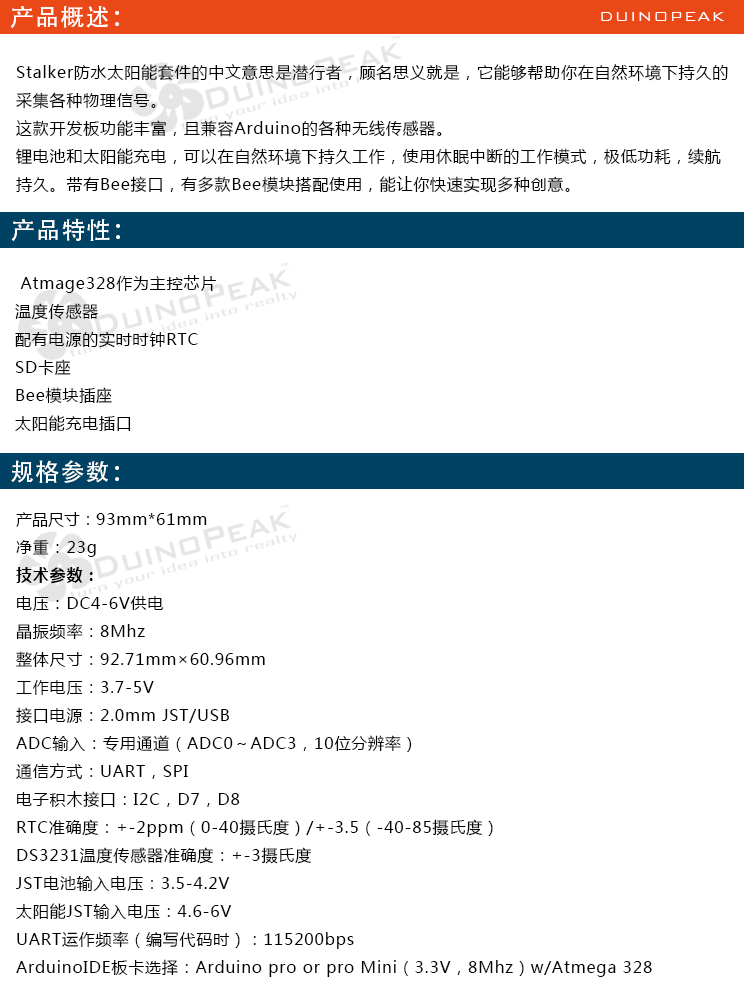
<style>
.page{position:relative;width:744px;height:992px;background:#ffffff}
.page>*{position:absolute;margin:0}
.t1{font:24px "AdobeHeitiStd-Regular";letter-spacing:0.05em;color:#ffffff}
.t2{font:18px "BankGothicBT-Light";letter-spacing:0.05em;color:#ffffff}
.t3{font:16px "MicrosoftYaHei";letter-spacing:0.05em;color:#000000}
.t4{font:16px "MicrosoftYaHei";color:#000000}
.t5{font:16px "MicrosoftYaHei-Bold";letter-spacing:0.05em;color:#000000}
</style>
<div class="page">
<p class="t1" style="left:10px;top:6px;width:109px;height:23px">产品概述：</p>
<p class="t2" style="left:601px;top:12px;width:124px;height:9px">DUINOPEAK</p>
<p class="t3" style="left:16px;top:64px;width:712px;height:129px">Stalker防水太阳能套件的中文意思是潜行者，顾名思义就是，它能够帮助你在自然环境下持久的<br>采集各种物理信号。<br>这款开发板功能丰富，且兼容Arduino的各种无线传感器。<br>锂电池和太阳能充电，可以在自然环境下持久工作，使用休眠中断的工作模式，极低功耗，续航<br>持久。带有Bee接口，有多款Bee模块搭配使用，能让你快速实现多种创意。</p>
<p class="t1" style="left:11px;top:218px;width:109px;height:24px">产品特性：</p>
<p class="t3" style="left:15px;top:275px;width:201px;height:157px">Atmage328作为主控芯片<br>温度传感器<br>配有电源的实时时钟RTC<br>SD卡座<br>Bee模块插座<br>太阳能充电插口</p>
<p class="t1" style="left:11px;top:460px;width:108px;height:23px">规格参数：</p>
<p class="t3" style="left:16px;top:512px;width:636px;height:465px"><span class="t4">产品尺寸：</span>93mm*61mm<br>净重：23g<br><span class="t5">技术参数：<br></span>电压：DC4-6V供电<br>晶振频率：8Mhz<br>整体尺寸：92.71mm×60.96mm<br>工作电压：3.7-5V<br>接口电源：2.0mm JST/USB<br>ADC输入：专用通道（ADC0～ADC3，10位分辨率）<br>通信方式：UART，SPI<br>电子积木接口：I2C，D7，D8<br>RTC准确度：+-2ppm（0-40摄氏度）/+-3.5（-40-85摄氏度）<br>DS3231温度传感器准确度：+-3摄氏度<br>JST电池输入电压：3.5-4.2V<br>太阳能JST输入电压：4.6-6V<br>UART运作频率（编写代码时）：115200bps<br>ArduinoIDE板卡选择：Arduino pro or pro Mini（3.3V，8Mhz）w/Atmega 328</p>
</div>
